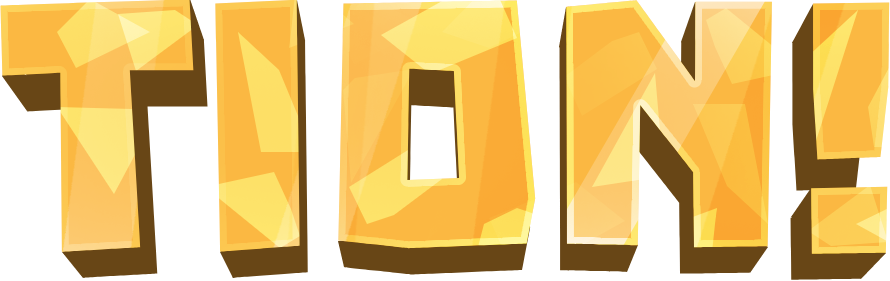
<style>
.page{position:relative;width:890px;height:281px;background:#ffffff}
.page>*{position:absolute;margin:0}
.t1{font:399.6px "Troika"}
</style>
<div class="page">
<p class="t1" style="left:0px;top:0px;width:890px;height:254px">TION!</p>
</div>
